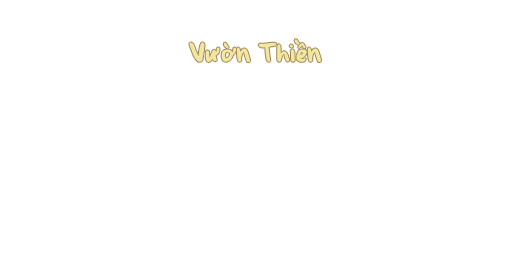
<style>
.page{position:relative;width:512px;height:256px;background:#ffffff}
.page>*{position:absolute;margin:0}
.t1{font:29.3px "BrianneTod";color:#f0e8a0}
</style>
<div class="page">
<p class="t1" style="left:189px;top:39px;width:133px;height:23px">Vườn Thiền</p>
</div>
